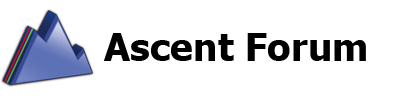
<style>
.page{position:relative;width:400px;height:102px;background:#ffffff}
.page>*{position:absolute;margin:0}
.t1{font:38.2px "Tahoma-Bold";color:#000000}
</style>
<div class="page">
<p class="t1" style="left:103px;top:33px;width:263px;height:28px">Ascent Forum</p>
</div>
